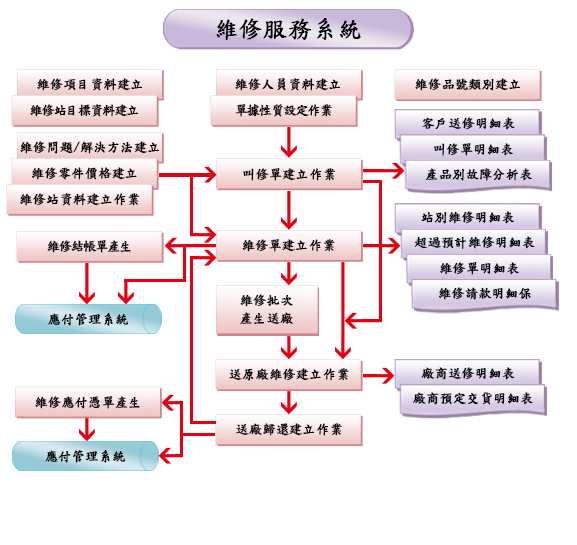
<style>
.page{position:relative;width:577px;height:545px;background:#ffffff}
.page>*{position:absolute;margin:0}
.t1{font:24px "DFKaiShu-SB-Estd-BF";color:#000000;font-weight:bold}
.t2{font:13.1px "DFKaiShu-SB-Estd-BF";color:#000000;font-weight:bold}
.t3{font:13.1px "DFKaiShu-SB-Estd-BF";letter-spacing:-0.1em;color:#000000;font-weight:bold}
.t4{font:13.1px/18.4px "DFKaiShu-SB-Estd-BF";color:#000000;font-weight:bold}
</style>
<div class="page">
<p class="t1" style="left:216px;top:18px;width:145px;height:22px">維修服務系統</p>
<p class="t2" style="left:37px;top:78px;width:105px;height:13px">維修項目資料建立</p>
<p class="t2" style="left:235px;top:78px;width:105px;height:13px">維修人員資料建立</p>
<p class="t2" style="left:415px;top:78px;width:105px;height:13px">維修品號類別建立</p>
<p class="t3" style="left:30px;top:104px;width:108px;height:13px">維修站目標資料建立</p>
<p class="t3" style="left:235px;top:104px;width:97px;height:13px">單據性質設定作業</p>
<p class="t2" style="left:422px;top:117px;width:93px;height:13px">客戶送修明細表</p>
<p class="t2" style="left:20px;top:141px;width:139px;height:13px">維修問題/解決方法建立</p>
<p class="t2" style="left:434px;top:143px;width:79px;height:13px">叫修單明細表</p>
<p class="t2" style="left:31px;top:167px;width:106px;height:13px">維修零件價格建立</p>
<p class="t2" style="left:243px;top:168px;width:93px;height:13px">叫修單建立作業</p>
<p class="t2" style="left:425px;top:168px;width:107px;height:13px">產品別故障分析表</p>
<p class="t2" style="left:20px;top:193px;width:120px;height:13px">維修站資料建立作業</p>
<p class="t2" style="left:421px;top:211px;width:94px;height:13px">站別維修明細表</p>
<p class="t3" style="left:47px;top:240px;width:84px;height:13px">維修結帳單產生</p>
<p class="t2" style="left:242px;top:239px;width:93px;height:13px">維修單建立作業</p>
<p class="t2" style="left:414px;top:236px;width:121px;height:13px">超過預計維修明細表</p>
<p class="t2" style="left:440px;top:262px;width:79px;height:13px">維修單明細表</p>
<p class="t4" style="left:240px;top:294px;width:54px;height:31px;text-align:center">維修批次<br>產生送廠</p>
<p class="t2" style="left:438px;top:287px;width:93px;height:13px">維修請款明細保</p>
<p class="t2" style="left:48px;top:313px;width:81px;height:13px">應付管理系統</p>
<p class="t2" style="left:229px;top:368px;width:120px;height:13px">送原廠維修建立作業</p>
<p class="t2" style="left:421px;top:367px;width:94px;height:13px">廠商送修明細表</p>
<p class="t2" style="left:35px;top:396px;width:105px;height:13px">維修應付憑單產生</p>
<p class="t2" style="left:412px;top:392px;width:121px;height:13px">廠商預定交貨明細表</p>
<p class="t2" style="left:236px;top:423px;width:106px;height:13px">送廠歸還建立作業</p>
<p class="t2" style="left:45px;top:450px;width:81px;height:13px">應付管理系統</p>
</div>
